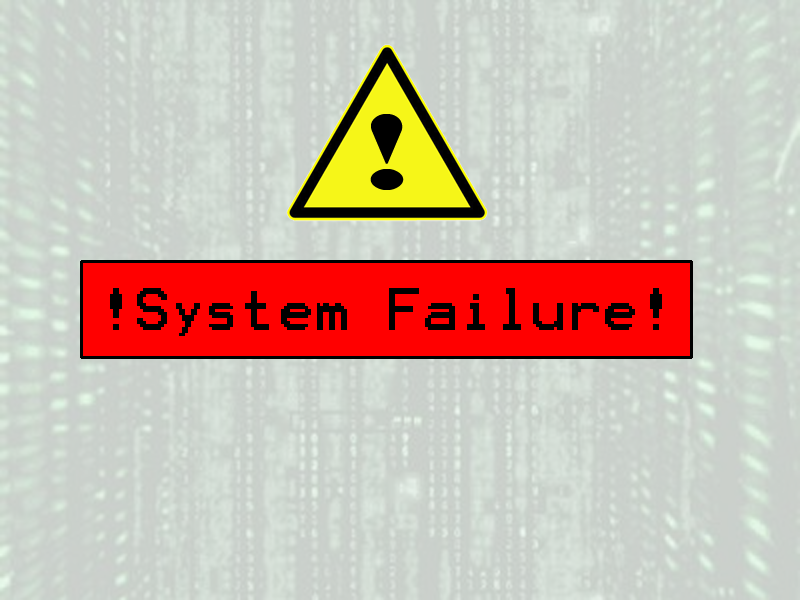
<style>
.page{position:relative;width:800px;height:600px}
.page>*{position:absolute;margin:0}
.t1{font:110px "LatinWide";color:#000000}
.t2{font:48px "Terminal";color:#000000}
</style>
<div class="page">
<p class="t1" style="left:370px;top:114px;width:34px;height:76px">!</p>
<p class="t2" style="left:110px;top:288px;width:552px;height:48px">!System Failure!</p>
</div>
